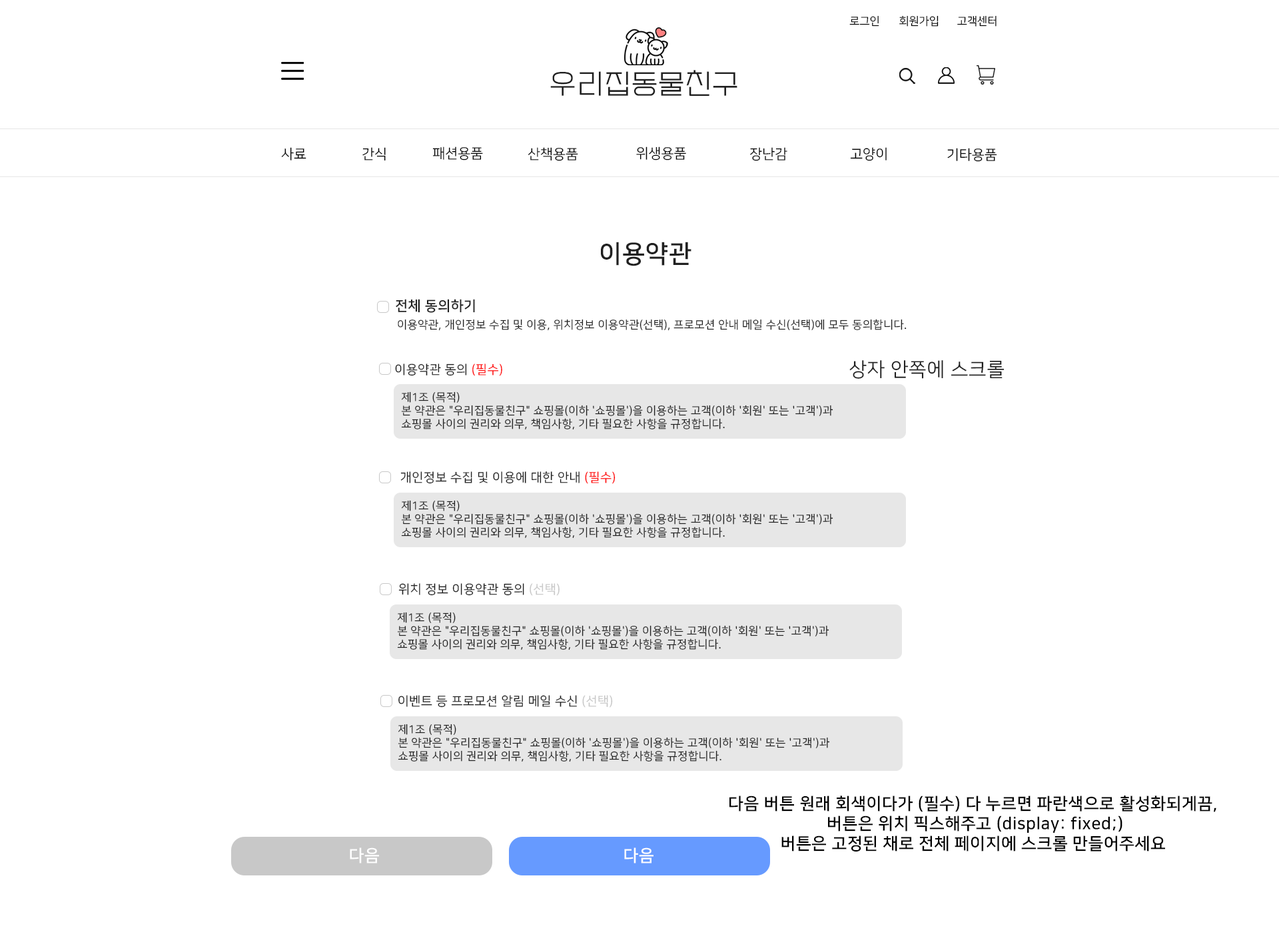
<style>
.page{position:relative;width:1279px;height:932px;background:#ffffff}
.page>*{position:absolute;margin:0}
.t1{font:11.1px "NanumSquareR";color:#000000}
.t2{font:27.8px "EF_watermelonSalad";letter-spacing:0.025em;color:#202020}
.t3{font:13.9px "NanumSquareR";color:#000000}
.t4{font:25px "NanumSquareB";letter-spacing:0.025em;color:#202020}
.t5{font:13.9px "NanumSquareB";letter-spacing:0.025em;color:#202020}
.t6{font:11.1px "NanumSquareR";letter-spacing:0.025em;color:#202020}
.t7{font:12.5px "NanumSquareR";letter-spacing:0.025em;color:#202020}
.t8{font:12.5px "NanumSquareR";letter-spacing:0.025em;color:#ff0000}
.t9{font:19.4px "NanumSquareR";letter-spacing:0.025em;color:#202020}
.t10{font:12.5px "NanumSquareR";letter-spacing:0.025em;color:#c8c8c8}
.t11{font:16.7px "NanumSquareB";letter-spacing:0.025em;color:#000000}
.t12{font:16.7px "NanumSquareB";letter-spacing:0.025em;color:#ffffff}
</style>
<div class="page">
<p class="t1" style="left:849px;top:15px;width:30px;height:12px">로그인</p>
<p class="t1" style="left:899px;top:15px;width:39px;height:12px">회원가입</p>
<p class="t1" style="left:957px;top:15px;width:39px;height:12px">고객센터</p>
<p class="t2" style="left:550px;top:70px;width:187px;height:26px">우리집동물친구</p>
<p class="t3" style="left:281px;top:147px;width:25px;height:14px">사료</p>
<p class="t3" style="left:362px;top:147px;width:24px;height:14px">간식</p>
<p class="t3" style="left:432px;top:147px;width:51px;height:14px">패션용품</p>
<p class="t3" style="left:528px;top:147px;width:50px;height:14px">산책용품</p>
<p class="t3" style="left:636px;top:147px;width:50px;height:14px">위생용품</p>
<p class="t3" style="left:750px;top:147px;width:37px;height:14px">장난감</p>
<p class="t3" style="left:850px;top:147px;width:37px;height:14px">고양이</p>
<p class="t3" style="left:947px;top:148px;width:50px;height:14px">기타용품</p>
<p class="t4" style="left:601px;top:242px;width:90px;height:24px">이용약관</p>
<p class="t5" style="left:396px;top:299px;width:79px;height:14px">전체 동의하기</p>
<p class="t6" style="left:398px;top:319px;width:508px;height:12px">이용약관, 개인정보 수집 및 이용, 위치정보 이용약관(선택), 프로모션 안내 메일 수신(선택)에 모두 동의합니다.</p>
<p class="t7" style="left:395px;top:364px;width:107px;height:12px">이용약관 동의<span class="t8"> (필수)</span></p>
<p class="t9" style="left:849px;top:360px;width:155px;height:19px">상자 안쪽에 스크롤</p>
<p class="t6" style="left:401px;top:392px;width:432px;height:38px">제1조 (목적)<br>본 약관은 "우리집동물친구" 쇼핑몰(이하 '쇼핑몰')을 이용하는 고객(이하 '회원' 또는 '고객')과 <br>쇼핑몰 사이의 권리와 의무, 책임사항, 기타 필요한 사항을 규정합니다.</p>
<p class="t7" style="left:400px;top:472px;width:215px;height:12px">개인정보 수집 및 이용에 대한 안내 <span class="t8">(필수)</span></p>
<p class="t6" style="left:401px;top:500px;width:432px;height:39px">제1조 (목적)<br>본 약관은 "우리집동물친구" 쇼핑몰(이하 '쇼핑몰')을 이용하는 고객(이하 '회원' 또는 '고객')과 <br>쇼핑몰 사이의 권리와 의무, 책임사항, 기타 필요한 사항을 규정합니다.</p>
<p class="t7" style="left:398px;top:583px;width:161px;height:13px">위치 정보 이용약관 동의 <span class="t10">(선택)</span></p>
<p class="t6" style="left:397px;top:612px;width:432px;height:39px">제1조 (목적)<br>본 약관은 "우리집동물친구" 쇼핑몰(이하 '쇼핑몰')을 이용하는 고객(이하 '회원' 또는 '고객')과 <br>쇼핑몰 사이의 권리와 의무, 책임사항, 기타 필요한 사항을 규정합니다.</p>
<p class="t7" style="left:398px;top:695px;width:215px;height:13px">이벤트 등 프로모션 알림 메일 수신 <span class="t10">(선택)</span></p>
<p class="t6" style="left:398px;top:724px;width:432px;height:39px">제1조 (목적)<br>본 약관은 "우리집동물친구" 쇼핑몰(이하 '쇼핑몰')을 이용하는 고객(이하 '회원' 또는 '고객')과 <br>쇼핑몰 사이의 권리와 의무, 책임사항, 기타 필요한 사항을 규정합니다.</p>
<p class="t11" style="left:729px;top:796px;width:487px;height:57px;text-align:center">다음 버튼 원래 회색이다가 (필수) 다 누르면 파란색으로 활성화되게끔, <br>버튼은 위치 픽스해주고 (display: fixed;)<br>버튼은 고정된 채로 전체 페이지에 스크롤 만들어주세요</p>
<p class="t12" style="left:350px;top:848px;width:29px;height:16px">다음</p>
<p class="t12" style="left:624px;top:848px;width:29px;height:16px">다음</p>
</div>
